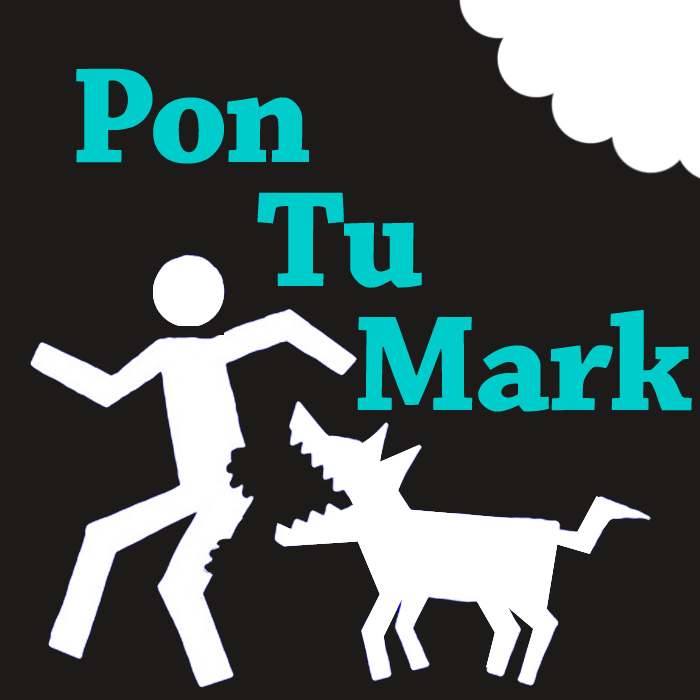
<style>
.page{position:relative;width:700px;height:700px;background:#1d1a1a}
.page>*{position:absolute;margin:0}
.t1{font:143.3px/124px "ChaparralPro-Bold";letter-spacing:-0.025em;color:#00cccc}
</style>
<div class="page">
<p class="t1" style="left:76px;top:68px;width:616px;height:344px">Pon<br>       Tu <br>         Mark</p>
</div>
